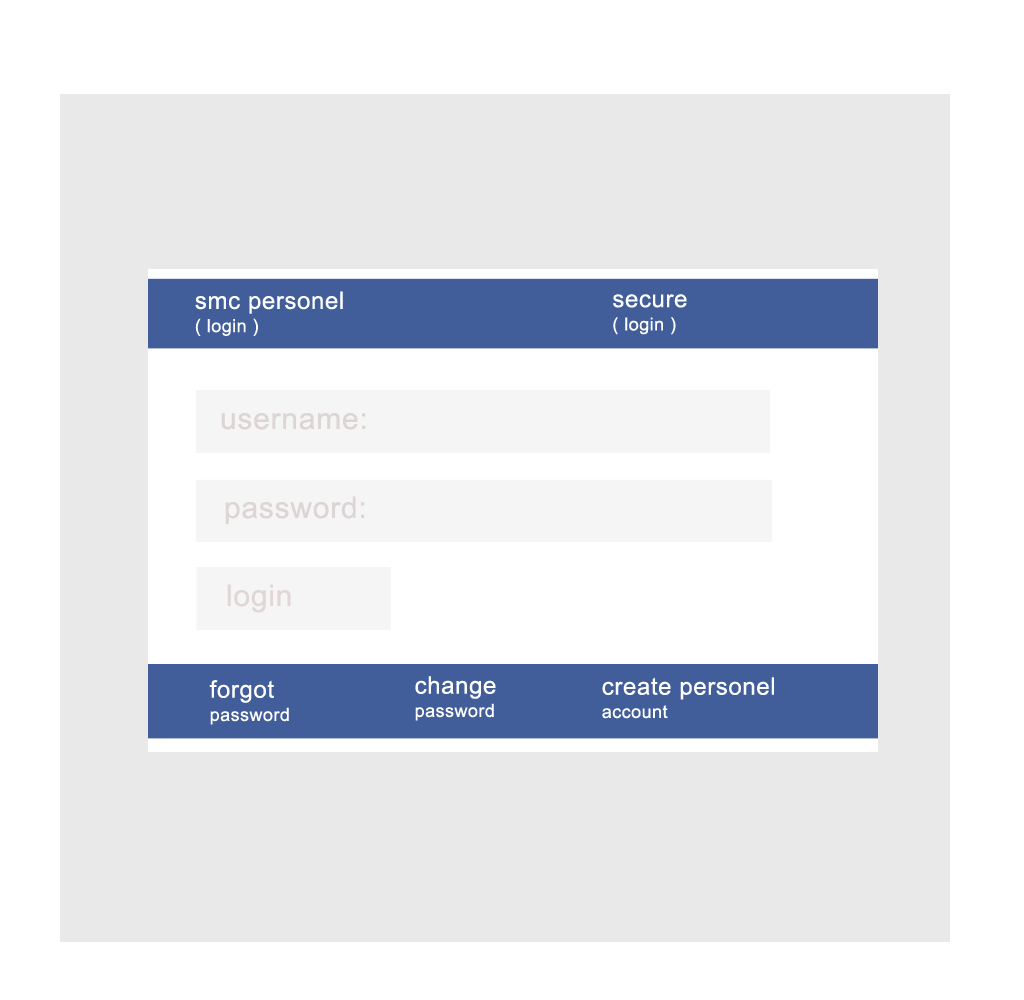
<style>
.page{position:relative;width:1024px;height:1000px;background:#ffffff}
.page>*{position:absolute;margin:0}
.t1{font:24px/11.6px "ArialMT";letter-spacing:0.025em;color:#ffffff}
.t2{font:18px/11.6px "ArialMT";letter-spacing:0.025em;color:#ffffff}
.t3{font:30px "ArialMT";letter-spacing:0.025em;color:#ddd4d4}
.t4{font:30px "ArialMT";letter-spacing:0.025em;color:#e1d6d6}
</style>
<div class="page">
<p class="t1" style="left:195px;top:291px;width:148px;height:45px">smc personel <br><span class="t2"><br>( login )</span></p>
<p class="t2" style="left:613px;top:294px;width:74px;height:41px"><span class="t1">secure <br></span><br>( login )</p>
<p class="t3" style="left:221px;top:413px;width:145px;height:17px">username:</p>
<p class="t3" style="left:225px;top:496px;width:140px;height:28px">password:</p>
<p class="t4" style="left:227px;top:584px;width:64px;height:29px">login</p>
<p class="t2" style="left:415px;top:676px;width:81px;height:45px"><span class="t1">change <br></span><br>password</p>
<p class="t1" style="left:602px;top:677px;width:172px;height:42px">create personel <br><span class="t2"><br>account</span></p>
<p class="t2" style="left:209px;top:680px;width:80px;height:45px"><span class="t1">forgot <br></span><br>password</p>
</div>
